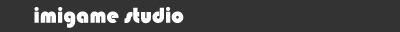
<style>
.page{position:relative;width:400px;height:32px;background:#333333}
.page>*{position:absolute;margin:0}
.t1{font:22.2px "Bauhaus93";color:#ffffff}
</style>
<div class="page">
<p class="t1" style="left:34px;top:7px;width:150px;height:21px">imigame studio</p>
</div>
